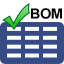
<style>
.page{position:relative;width:64px;height:64px;background:#364a86}
.page>*{position:absolute;margin:0}
.t1{font:14px "Arial-BoldMT";color:#000000}
</style>
<div class="page">
<p class="t1" style="left:31px;top:8px;width:31px;height:11px">BOM</p>
</div>
